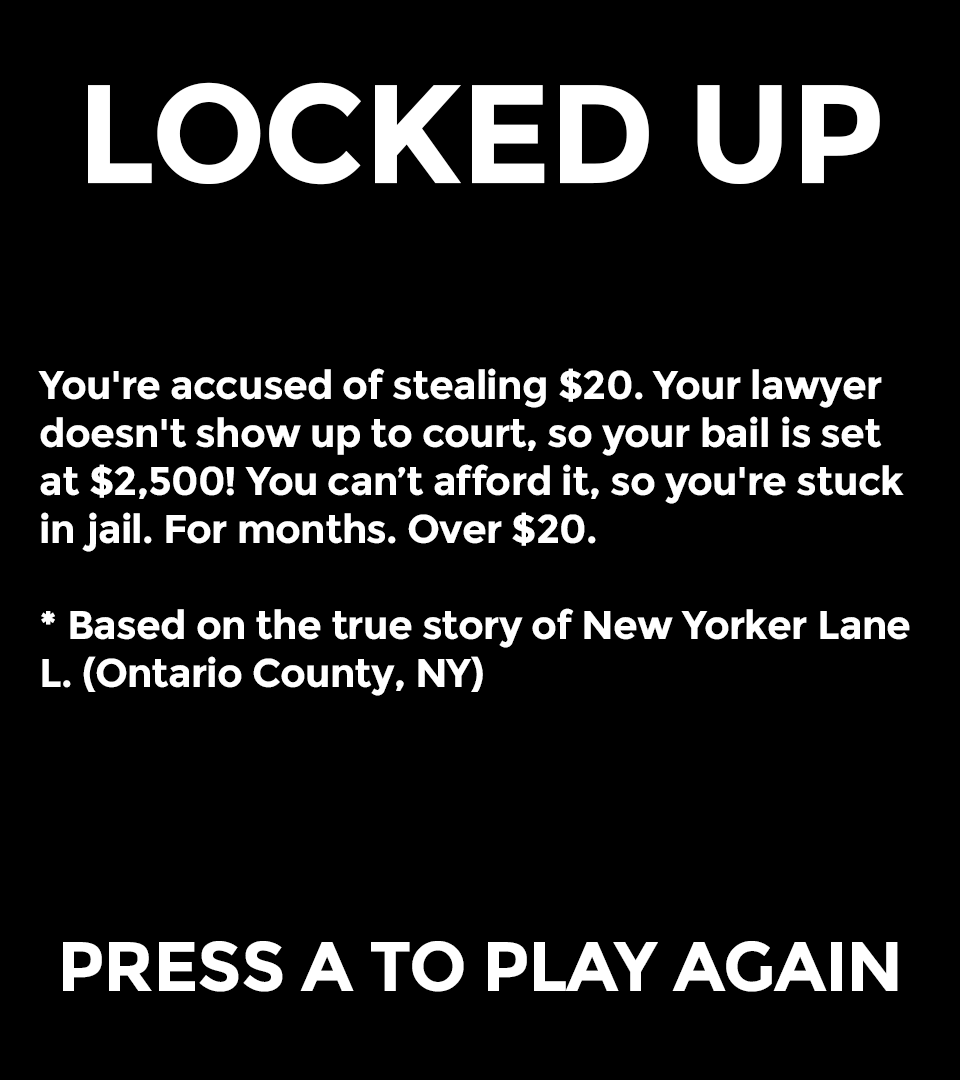
<style>
.page{position:relative;width:960px;height:1080px;background:#000000}
.page>*{position:absolute;margin:0}
.t1{font:40px "Montserrat-Bold";letter-spacing:-0.02em;color:#ffffff}
.t2{font:140px "Montserrat-Bold";letter-spacing:-0.02em;color:#ffffff}
.t3{font:70px "Montserrat-Bold";letter-spacing:-0.02em;color:#ffffff}
</style>
<div class="page">
<p class="t1" style="left:38px;top:82px;width:872px;height:614px;text-align:center"><span class="t2">LOCKED UP<br><br></span>You're accused of stealing $20. Your lawyer doesn't show up to court, so your bail is set at $2,500! You can’t afford it, so you're stuck in jail. For months. Over $20.<br><br>* Based on the true story of New Yorker Lane L. (Ontario County, NY)</p>
<p class="t3" style="left:63px;top:941px;width:835px;height:51px">PRESS A TO PLAY AGAIN</p>
</div>
